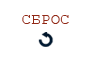
<style>
.page{position:relative;width:90px;height:62px;background:#ffffff}
.page>*{position:absolute;margin:0}
.t1{font:16px "CourierNewPSMT";color:#912816}
</style>
<div class="page">
<p class="t1" style="left:22px;top:15px;width:47px;height:9px">СБРОС</p>
</div>
